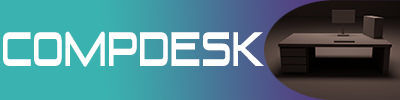
<style>
.page{position:relative;width:400px;height:100px}
.page>*{position:absolute;margin:0}
.t1{font:45.8px "VenusRising-Regular";color:#ffffff;scale:0.67 1}
</style>
<div class="page">
<p class="t1" style="left:3px;top:31px;width:261px;height:36px">CompDesk</p>
</div>
